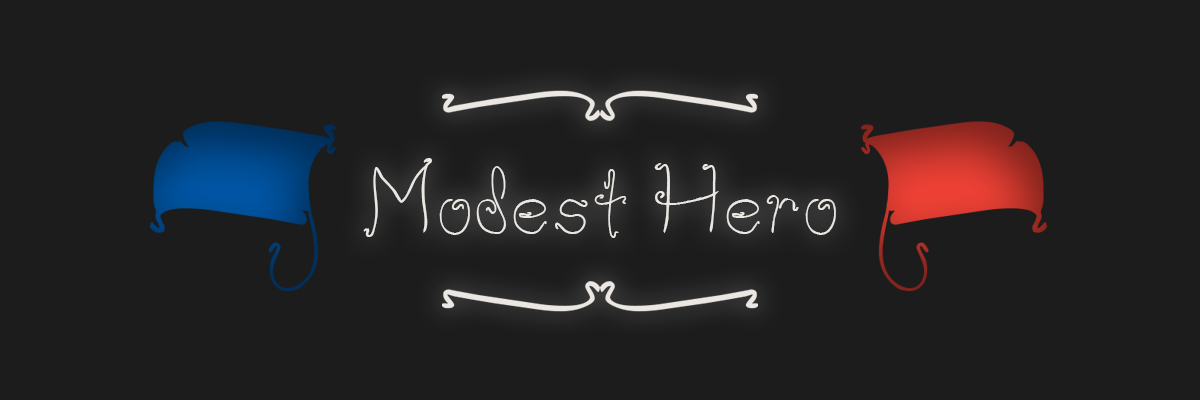
<style>
.page{position:relative;width:1200px;height:400px;background:#1c1c1c}
.page>*{position:absolute;margin:0}
.t1{font:76.8px "WaifThin";color:#ebe7e2}
</style>
<div class="page">
<p class="t1" style="left:363px;top:158px;width:473px;height:80px">Modest Hero</p>
</div>
